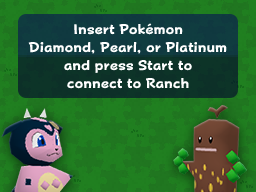
<style>
.page{position:relative;width:256px;height:192px}
.page>*{position:absolute;margin:0}
.t1{font:14px/18px "PopHappinessStd-EB";color:#ffffff}
</style>
<div class="page">
<p class="t1" style="left:28px;top:23px;width:199px;height:66px;text-align:center">Insert Pokémon<br>Diamond, Pearl, or Platinum<br>and press Start to<br>connect to Ranch</p>
</div>
